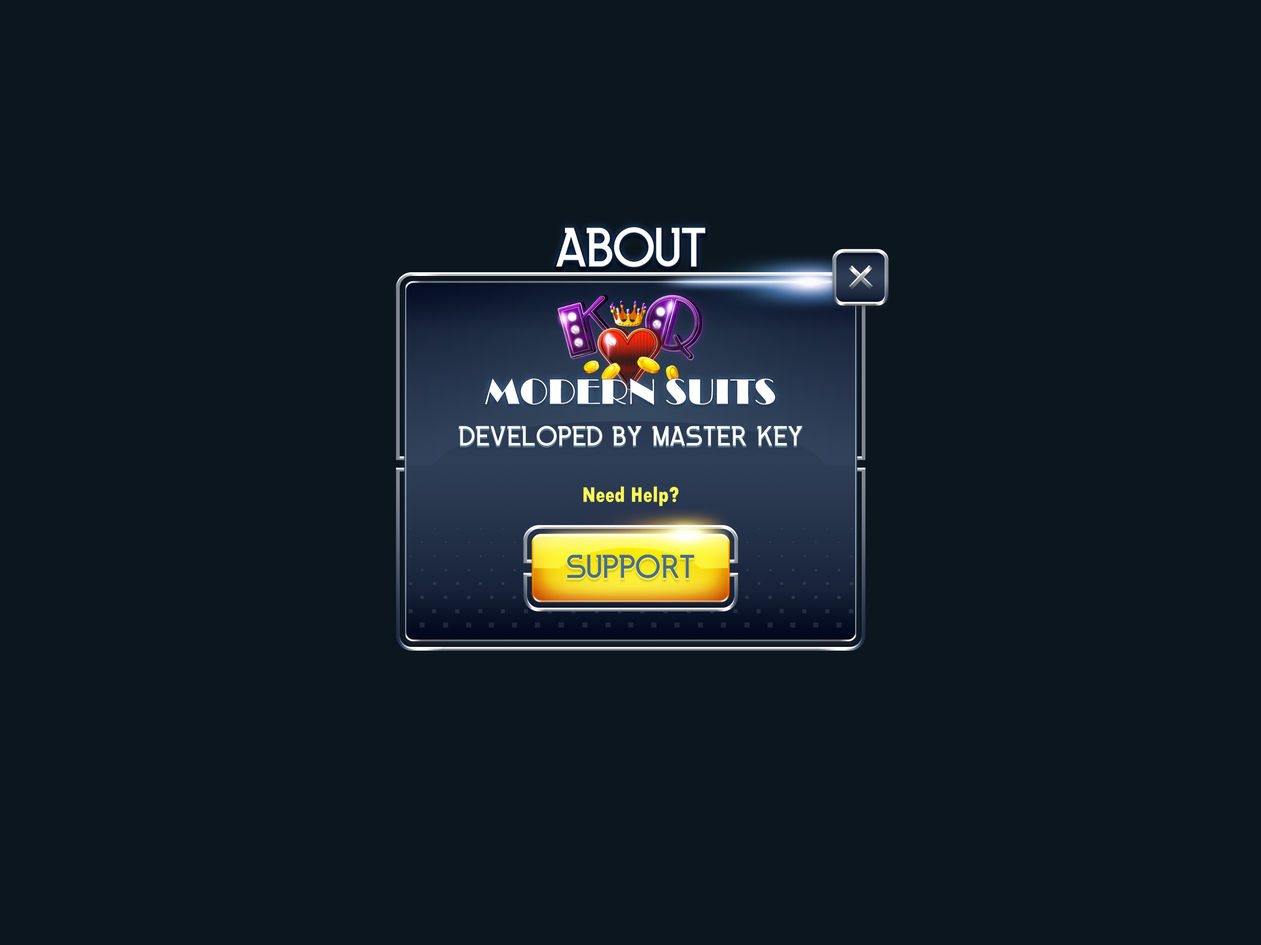
<style>
.page{position:relative;width:1261px;height:945px;background:#0c161f}
.page>*{position:absolute;margin:0}
.t1{font:55.4px "INKFERNO";letter-spacing:-0.025em;color:#ffffff;text-transform:uppercase}
.t2{font:36.9px "Broadway";color:#feffff;text-transform:uppercase}
.t3{font:27.7px "INKFERNO";color:#ffffff;text-transform:uppercase}
.t4{font:22.2px "TwCenMT-CondensedExtraBold";color:#fef859}
.t5{font:33.2px "INKFERNO";letter-spacing:-0.025em;color:#476f8b;text-transform:uppercase}
</style>
<div class="page">
<p class="t1" style="left:556px;top:227px;width:149px;height:40px">About</p>
<p class="t2" style="left:485px;top:379px;width:291px;height:26px">modern suits</p>
<p class="t3" style="left:459px;top:426px;width:344px;height:20px">Developed by master key</p>
<p class="t4" style="left:584px;top:487px;width:95px;height:19px">Need Help?</p>
<p class="t5" style="left:567px;top:554px;width:127px;height:24px">support</p>
</div>
